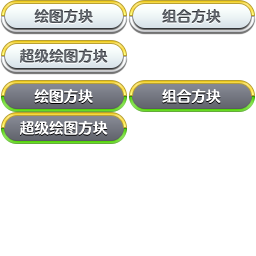
<style>
.page{position:relative;width:256px;height:256px;background:#ffffff}
.page>*{position:absolute;margin:0}
.t1{font:14.6px "FZFW-QingYinTiS-B--GB1-0";color:#61666d}
.t2{font:14.6px "FZFW-QingYinTiS-B--GB1-0";color:#ffffff}
</style>
<div class="page">
<p class="t1" style="left:34px;top:9px;width:59px;height:14px">绘图方块</p>
<p class="t1" style="left:162px;top:9px;width:59px;height:14px">组合方块</p>
<p class="t1" style="left:20px;top:48px;width:88px;height:15px">超级绘图方块</p>
<p class="t2" style="left:34px;top:89px;width:59px;height:14px">绘图方块</p>
<p class="t2" style="left:162px;top:89px;width:59px;height:14px">组合方块</p>
<p class="t2" style="left:20px;top:120px;width:88px;height:15px">超级绘图方块</p>
</div>
